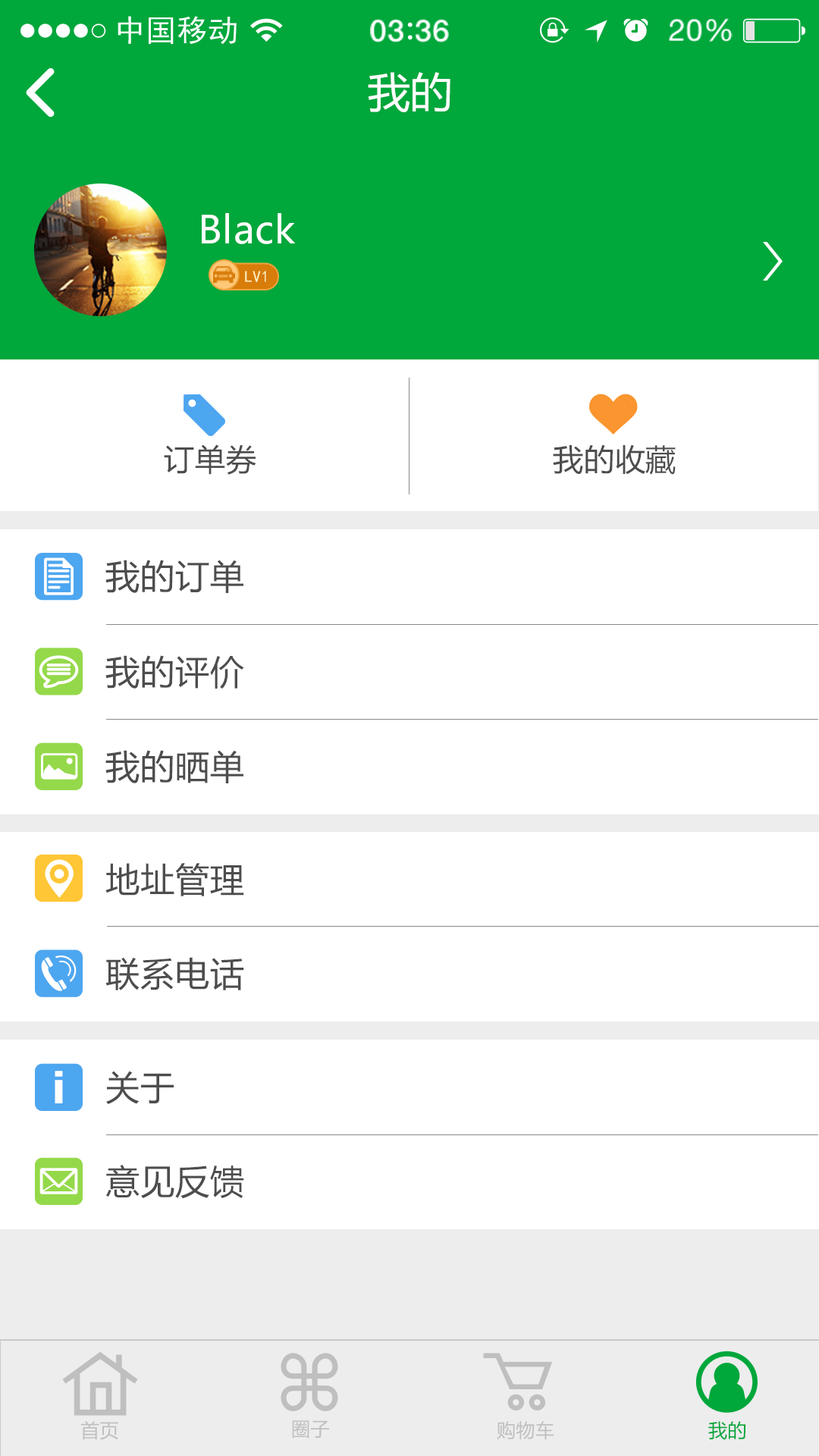
<style>
.page{position:relative;width:819px;height:1456px;background:#ffffff}
.page>*{position:absolute;margin:0}
.t1{font:41.7px "MicrosoftYaHei";letter-spacing:0.02em;color:#ffffff}
.t2{font:37.9px "MicrosoftYaHei";letter-spacing:0.02em;color:#ffffff}
.t3{font:16.2px "SimHei";letter-spacing:0.02em;color:#fff1bf}
.t4{font:30.3px "MicrosoftYaHei";letter-spacing:0.02em;color:#4d4d4d}
.t5{font:34.1px "MicrosoftYaHei";letter-spacing:0.02em;color:#4d4d4d}
.t6{font:18.9px "MicrosoftYaHei";letter-spacing:0.02em;color:#bfbfbf}
.t7{font:18.9px "MicrosoftYaHei";letter-spacing:0.02em;color:#00a73b}
</style>
<div class="page">
<p class="t1" style="left:368px;top:72px;width:82px;height:40px">我的</p>
<p class="t2" style="left:202px;top:213px;width:94px;height:31px">Black</p>
<p class="t3" style="left:245px;top:271px;width:21px;height:11px">LV1</p>
<p class="t4" style="left:164px;top:444px;width:92px;height:31px">订单券</p>
<p class="t4" style="left:553px;top:444px;width:123px;height:31px">我的收藏</p>
<p class="t5" style="left:105px;top:560px;width:138px;height:33px">我的订单</p>
<p class="t5" style="left:105px;top:655px;width:139px;height:34px">我的评价</p>
<p class="t5" style="left:105px;top:750px;width:138px;height:33px">我的晒单</p>
<p class="t5" style="left:105px;top:863px;width:139px;height:33px">地址管理</p>
<p class="t5" style="left:105px;top:957px;width:139px;height:33px">联系电话</p>
<p class="t5" style="left:106px;top:1071px;width:68px;height:33px">关于</p>
<p class="t5" style="left:106px;top:1165px;width:138px;height:34px">意见反馈</p>
<p class="t6" style="left:80px;top:1421px;width:38px;height:19px">首页</p>
<p class="t6" style="left:292px;top:1420px;width:37px;height:19px">圈子</p>
<p class="t6" style="left:497px;top:1421px;width:57px;height:19px">购物车</p>
<p class="t7" style="left:708px;top:1421px;width:38px;height:19px">我的</p>
</div>
